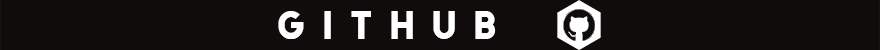
<style>
.page{position:relative;width:880px;height:50px;background:#100c0b}
.page>*{position:absolute;margin:0}
.t1{font:37.5px "TheNextFont";letter-spacing:0.48em;color:#ffffff}
</style>
<div class="page">
<p class="t1" style="left:278px;top:11px;width:218px;height:28px">GITHUB</p>
</div>
